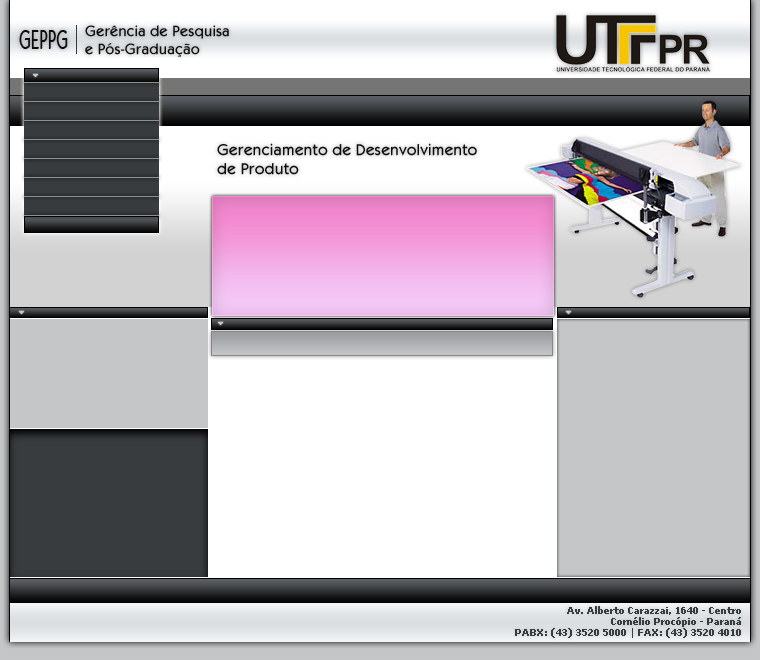
<style>
.page{position:relative;width:760px;height:660px;background:#ffffff}
.page>*{position:absolute;margin:0}
.t1{font:27.5px "KabobRegular";color:#0e0e0f;scale:0.58 1}
.t2{font:15px "KabobRegular";color:#0e0e0f}
.t3{font:16px "KabobRegular";color:#0e0e0f}
.t4{font:9px "Verdana-Bold";color:#393c3f}
</style>
<div class="page">
<p class="t1" style="left:19px;top:30px;width:49px;height:19px">GEPPG</p>
<p class="t2" style="left:85px;top:25px;width:144px;height:32px">Gerência de Pesquisa <br>e Pós-Graduação</p>
<p class="t3" style="left:217px;top:143px;width:260px;height:32px">Gerenciamento de Desenvolvimento <br>de Produto</p>
<p class="t4" style="left:515px;top:606px;width:226px;height:32px;text-align:right">Av. Alberto Carazzai, 1640 - Centro<br>Cornélio Procópio - Paraná<br>PABX: (43) 3520 5000 | FAX: (43) 3520 4010</p>
</div>
